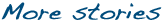
<style>
.page{position:relative;width:163px;height:23px;background:#ffffff}
.page>*{position:absolute;margin:0}
.t1{font:24px "Handwriting-Dakota";color:#004c7c;font-weight:bold}
</style>
<div class="page">
<p class="t1" style="left:1px;top:2px;width:161px;height:18px">More stories</p>
</div>
